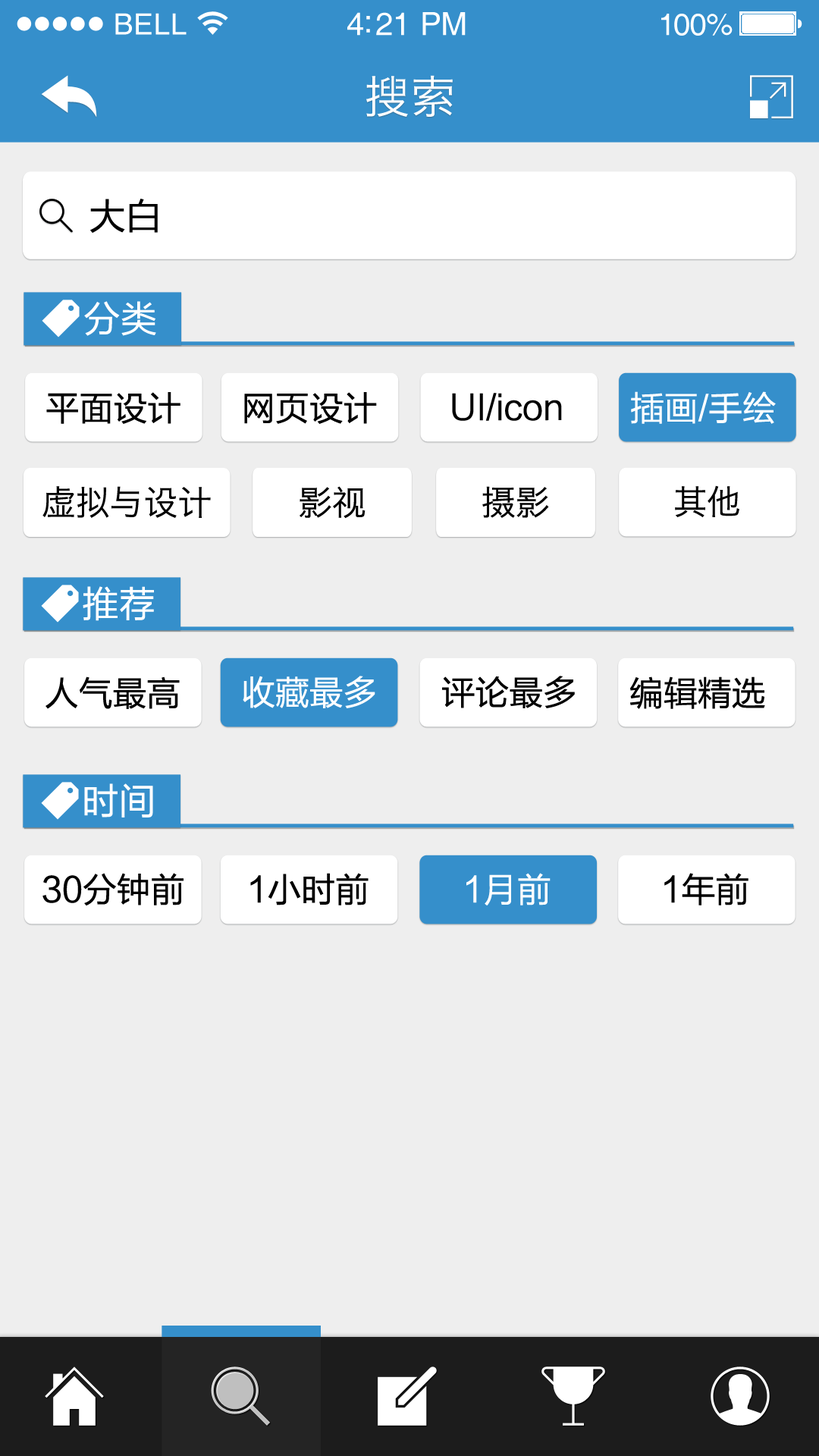
<style>
.page{position:relative;width:819px;height:1456px;background:#eeeeee}
.page>*{position:absolute;margin:0}
.t1{font:29.3px "Helvetica";letter-spacing:0.02em;color:#ffffff}
.t2{font:31.8px "Helvetica";letter-spacing:-0.02em;color:#ffffff}
.t3{font:30.6px "Helvetica";letter-spacing:-0.02em;color:#ffffff}
.t4{font:45.5px "HiraginoSansGB-W3";letter-spacing:0.025em;color:#ffffff}
.t5{font:36.4px "FZLTHJW--GB1-0";color:#000000}
.t6{font:36.4px "FZLTHJW--GB1-0";letter-spacing:0.01em;color:#ffffff}
.t7{font:34.1px "FZLTHJW--GB1-0";color:#000000}
.t8{font:34.1px "FZLTHJW--GB1-0";color:#ffffff}
.t9{font:34.1px "HiraginoSansGB-W3";color:#000000}
</style>
<div class="page">
<p class="t1" style="left:115px;top:13px;width:72px;height:22px">BELL</p>
<p class="t2" style="left:347px;top:12px;width:119px;height:24px">4:21 PM</p>
<p class="t3" style="left:661px;top:14px;width:72px;height:22px">100%</p>
<p class="t4" style="left:366px;top:75px;width:87px;height:42px">搜索</p>
<p class="t5" style="left:90px;top:199px;width:68px;height:34px">大白</p>
<p class="t6" style="left:84px;top:301px;width:72px;height:35px">分类</p>
<p class="t7" style="left:46px;top:392px;width:134px;height:32px">平面设计</p>
<p class="t7" style="left:244px;top:392px;width:133px;height:32px">网页设计</p>
<p class="t7" style="left:452px;top:393px;width:110px;height:28px">UI/icon</p>
<p class="t8" style="left:631px;top:391px;width:145px;height:33px">插画/手绘</p>
<p class="t9" style="left:675px;top:485px;width:64px;height:32px">其他</p>
<p class="t9" style="left:42px;top:486px;width:169px;height:32px">虚拟与设计</p>
<p class="t9" style="left:300px;top:486px;width:66px;height:33px">影视</p>
<p class="t9" style="left:482px;top:486px;width:67px;height:32px">摄影</p>
<p class="t6" style="left:83px;top:586px;width:71px;height:35px">推荐</p>
<p class="t7" style="left:45px;top:676px;width:135px;height:33px">人气最高</p>
<p class="t8" style="left:243px;top:676px;width:132px;height:32px">收藏最多</p>
<p class="t7" style="left:442px;top:676px;width:133px;height:32px">评论最多</p>
<p class="t7" style="left:630px;top:676px;width:135px;height:33px">编辑精选</p>
<p class="t6" style="left:84px;top:783px;width:69px;height:34px">时间</p>
<p class="t7" style="left:42px;top:873px;width:142px;height:32px">30分钟前</p>
<p class="t7" style="left:250px;top:873px;width:119px;height:32px">1小时前</p>
<p class="t8" style="left:466px;top:873px;width:85px;height:32px">1月前</p>
<p class="t7" style="left:664px;top:873px;width:84px;height:32px">1年前</p>
</div>
